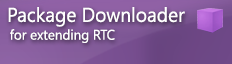
<style>
.page{position:relative;width:232px;height:64px}
.page>*{position:absolute;margin:0}
.t1{font:20px "SegoeUI";color:#ffffff;scale:0.96 1}
.t2{font:14px "SegoeUI";color:#ffffff;scale:0.96 1}
</style>
<div class="page">
<p class="t1" style="left:8px;top:7px;width:177px;height:20px">Package Downloader</p>
<p class="t2" style="left:10px;top:29px;width:105px;height:14px">for extending RTC</p>
</div>
